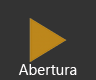
<style>
.page{position:relative;width:96px;height:80px;background:#333333}
.page>*{position:absolute;margin:0}
.t1{font:15px "SegoeUI";color:#fefcfc}
</style>
<div class="page">
<p class="t1" style="left:18px;top:64px;width:59px;height:11px">Abertura</p>
</div>
